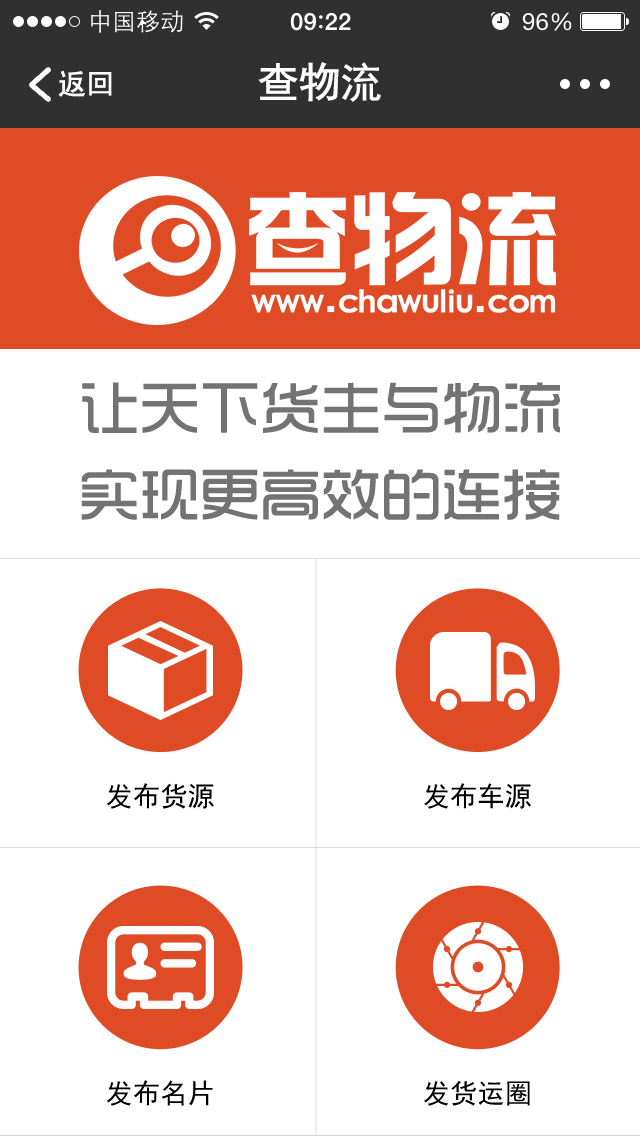
<style>
.page{position:relative;width:640px;height:1136px;background:#ffffff}
.page>*{position:absolute;margin:0}
.t1{font:60.2px/86.8px "TRENDS";color:#737373}
.t2{font:27.3px "SimHei";color:#000000}
</style>
<div class="page">
<p class="t1" style="left:81px;top:382px;width:479px;height:138px">让天下货主与物流<br>实现更高效的连接</p>
<p class="t2" style="left:106px;top:783px;width:108px;height:26px">发布货源</p>
<p class="t2" style="left:424px;top:783px;width:107px;height:26px">发布车源</p>
<p class="t2" style="left:106px;top:1080px;width:107px;height:26px">发布名片</p>
<p class="t2" style="left:424px;top:1080px;width:106px;height:26px">发货运圈</p>
</div>
